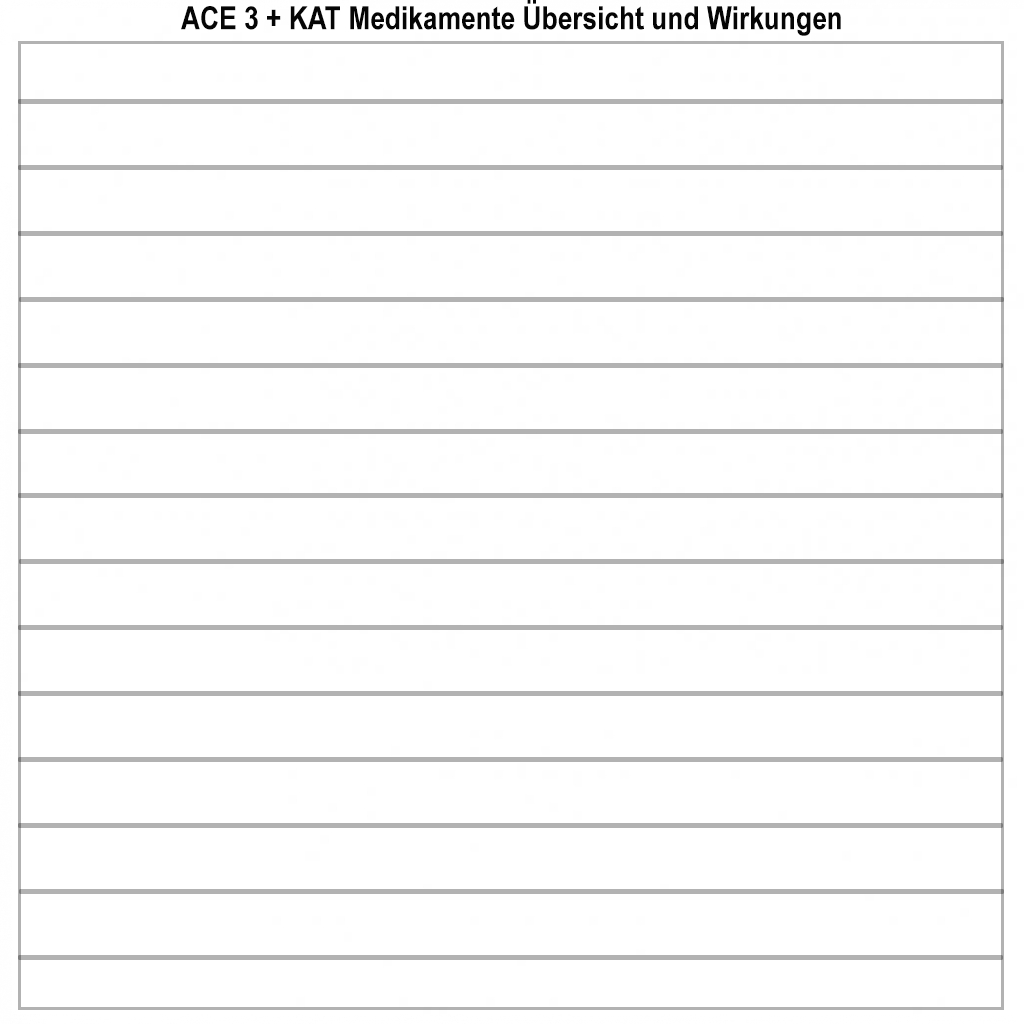
<style>
.page{position:relative;width:1024px;height:1024px;background:#ffffff}
.page>*{position:absolute;margin:0}
.t1{font:32.1px "ArialNarrow-Bold";color:#040504}
</style>
<div class="page">
<p class="t1" style="left:181px;top:0px;width:660px;height:36px">ACE 3 + KAT Medikamente Übersicht und Wirkungen</p>
</div>
